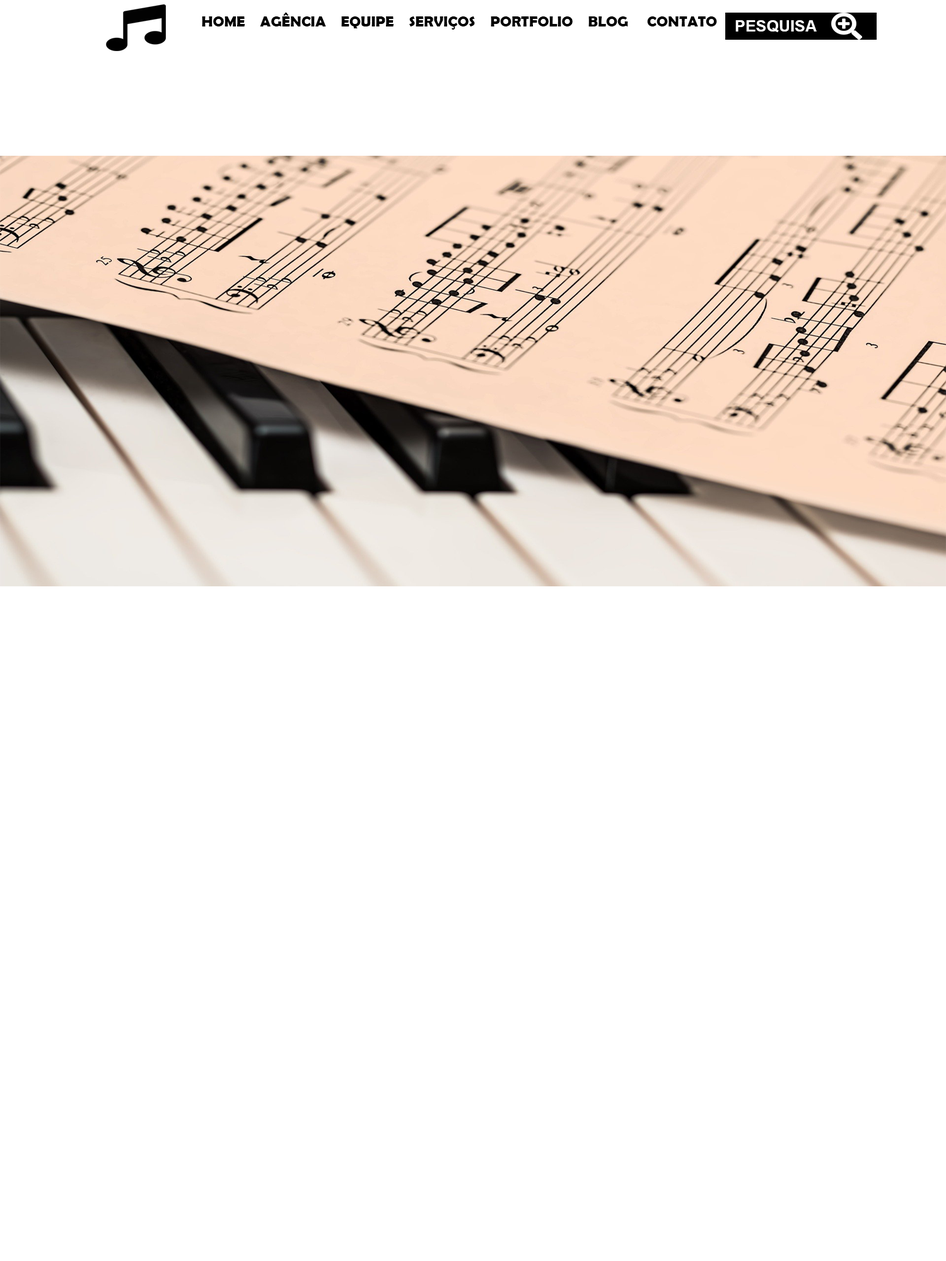
<style>
.page{position:relative;width:946px;height:1261px;background:#ffffff}
.page>*{position:absolute;margin:0}
.t1{font:15.1px "BerlinSansFBDemi-Bold";color:#000000}
.t2{font:15.8px "Arial-BoldMT";color:#ffffff}
</style>
<div class="page">
<p class="t1" style="left:202px;top:13px;width:515px;height:17px">HOME    AGÊNCIA    EQUIPE    SERVIÇOS    PORTFOLIO    BLOG     CONTATO</p>
<p class="t2" style="left:735px;top:20px;width:81px;height:12px">PESQUISA</p>
</div>
